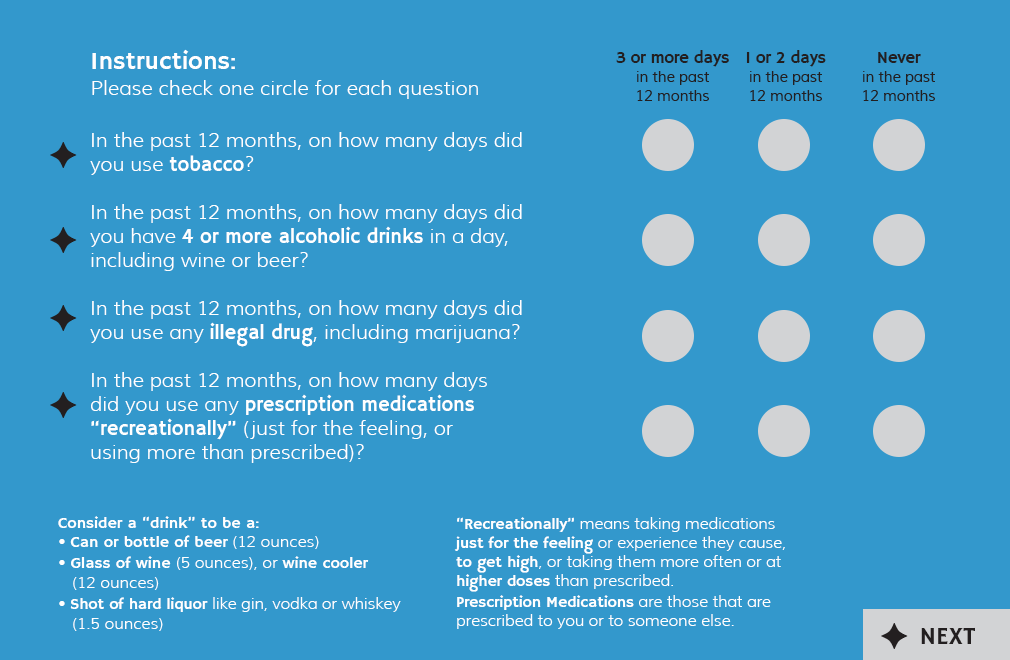
<style>
.page{position:relative;width:1010px;height:660px;background:#3398cc}
.page>*{position:absolute;margin:0}
.t1{font:25px "HammersmithOne-Regular";color:#ffffff}
.t2{font:15px/19px "Muli";letter-spacing:-0.01em;color:#231f20}
.t3{font:17px/19px "HammersmithOne-Regular";letter-spacing:-0.025em;color:#231f20}
.t4{font:20px "Muli-Light";color:#ffffff}
.t5{font:20px/24px "Muli-Light";color:#ffffff}
.t6{font:20px/24px "HammersmithOne-Regular";color:#ffffff}
.t7{font:16px/19px "HammersmithOne-Regular";color:#ffffff}
.t8{font:16px/19px "Muli-Light";color:#ffffff}
.t9{font:16px/19px "Muli-Light";letter-spacing:-0.01em;color:#ffffff}
.t10{font:16px/19px "HammersmithOne-Regular";letter-spacing:-0.01em;color:#ffffff}
.t11{font:25px "HammersmithOne-Regular";color:#231f20}
</style>
<div class="page">
<p class="t1" style="left:92px;top:49px;width:143px;height:20px">Instructions:</p>
<p class="t2" style="left:616px;top:50px;width:113px;height:51px;text-align:center"><span class="t3">3 or more days<br> </span>in the past <br>12 months</p>
<p class="t2" style="left:746px;top:50px;width:80px;height:51px;text-align:center"><span class="t3">1 or 2 days<br> </span>in the past <br>12 months</p>
<p class="t2" style="left:863px;top:52px;width:72px;height:49px;text-align:center"><span class="t3">Never<br> </span>in the past <br>12 months</p>
<p class="t4" style="left:92px;top:80px;width:386px;height:19px">Please check one circle for each question</p>
<p class="t5" style="left:90px;top:132px;width:432px;height:331px">In the past 12 months, on how many days did <br>you use <span class="t6">tobacco</span>? <br> <br>In the past 12 months, on how many days did <br>you have <span class="t6">4 or more alcoholic drinks </span>in a day, <br>including wine or beer?<br> <br>In the past 12 months, on how many days did <br>you use any <span class="t6">illegal drug</span>, including marijuana?<br> <br>In the past 12 months, on how many days <br>did you use any <span class="t6">prescription medications <br>“recreationally” </span>(just for the feeling, or <br>using more than prescribed)?</p>
<p class="t7" style="left:58px;top:516px;width:343px;height:115px">Consider a “drink” to be a:<br><span class="t8">• </span>Can or bottle of beer <span class="t8">(12 ounces)<br>• </span>Glass of wine <span class="t8">(5 ounces), or </span>wine cooler <br>   <span class="t8">(12 ounces) <br></span><span class="t9">• </span><span class="t10">Shot of hard liquor </span><span class="t9">like gin, vodka or whiskey <br>   </span><span class="t8">(1.5 ounces)</span></p>
<p class="t9" style="left:454px;top:517px;width:331px;height:112px"><span class="t10">“Recreationally” </span>means taking medications <br><span class="t10">just for the feeling </span>or experience they cause, <br><span class="t10">to get high</span>, or taking them more often or at <span class="t10">higher doses </span>than prescribed.<br><span class="t10">Prescription Medications </span>are those that are <br>prescribed to you or to someone else.</p>
<p class="t11" style="left:921px;top:627px;width:54px;height:17px">NEXT</p>
</div>
